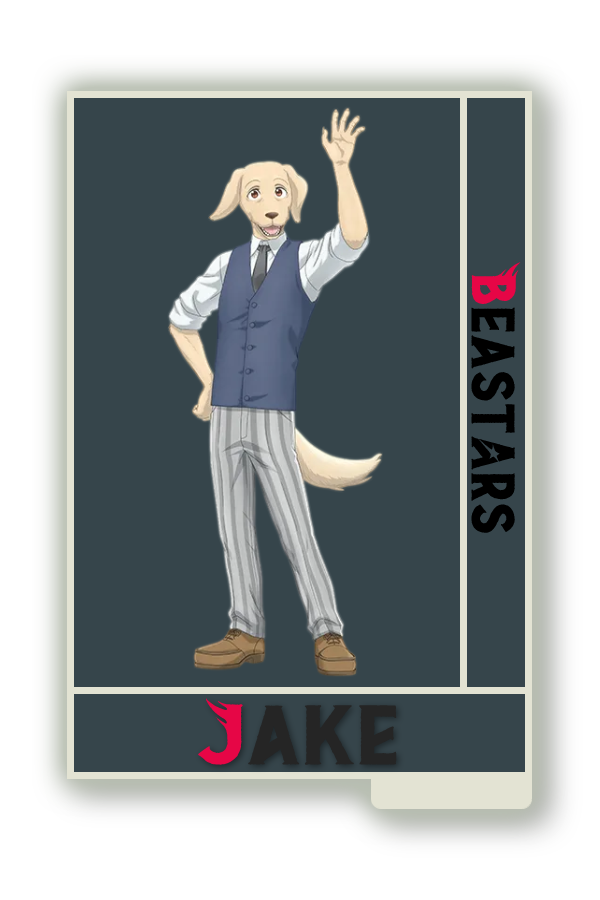
<style>
.page{position:relative;width:600px;height:900px;background:#36454b}
.page>*{position:absolute;margin:0}
.t1{font:48.8px "BEAST";color:#000000}
.t2{font:48.8px "BEAST";color:#e60646}
.t3{font:67px "BEAST";color:#252525;scale:1.12 1}
.t4{font:67px "BEAST";color:#e60646;scale:1.12 1}
</style>
<div class="page">
<p class="t1" style="left:471px;top:262px;width:50px;height:271px;rotate:90deg"><span class="t2">B</span>east@rs</p>
<p class="t3" style="left:198px;top:698px;width:199px;height:67px"><span class="t4">J</span>ake</p>
</div>
